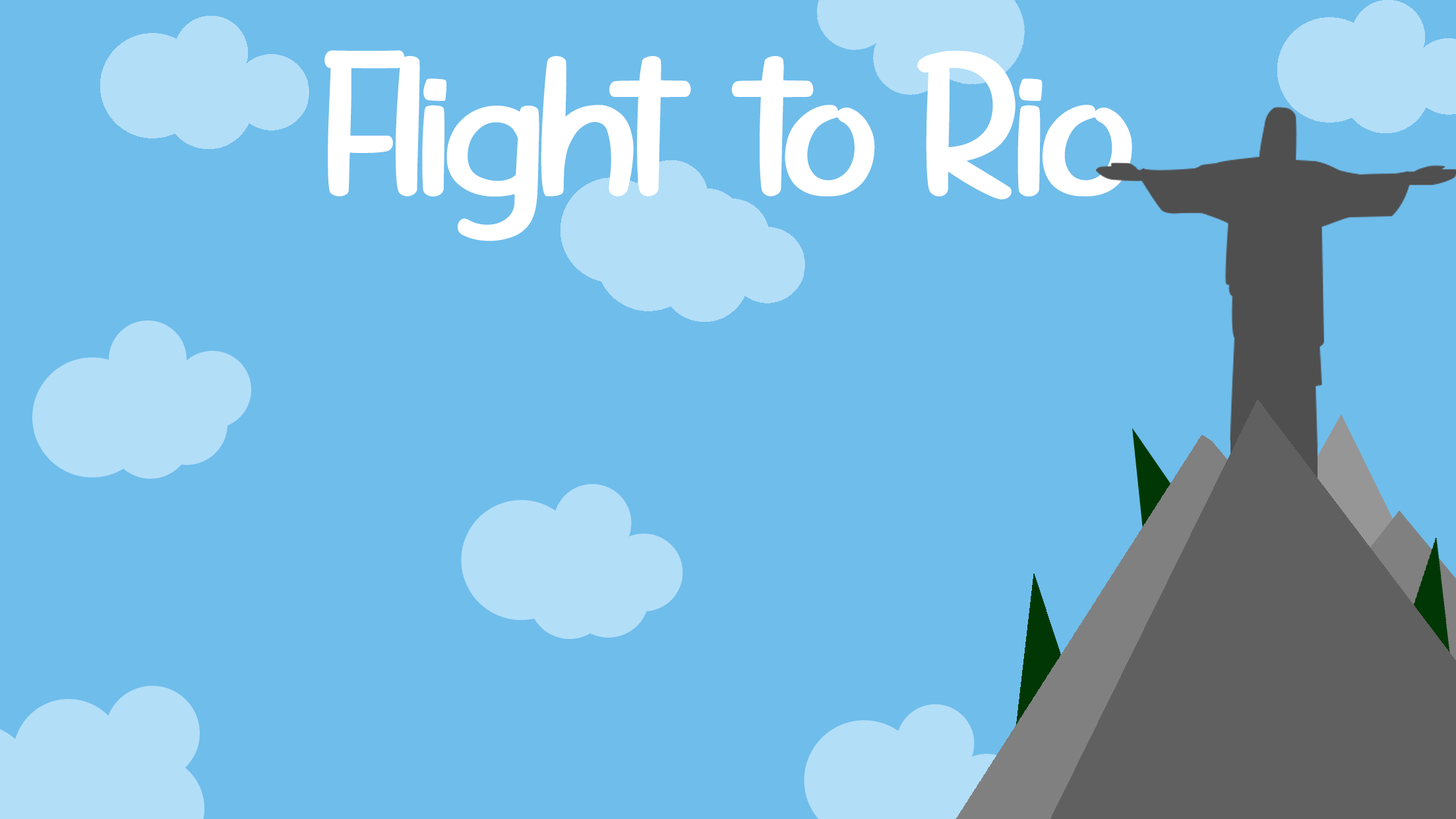
<style>
.page{position:relative;width:1456px;height:819px;background:#6fbdeb}
.page>*{position:absolute;margin:0}
.t1{font:207.1px "PamelawantaBiketoRide";letter-spacing:-0.04em;color:#ffffff;scale:1.27 1}
</style>
<div class="page">
<p class="t1" style="left:324px;top:50px;width:808px;height:191px">Flight  to Rio</p>
</div>
